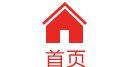
<style>
.page{position:relative;width:129px;height:67px;background:#ffffff}
.page>*{position:absolute;margin:0}
.t1{font:18.9px "MicrosoftYaHei";letter-spacing:0.1em;color:#e82822;scale:1.04 1}
</style>
<div class="page">
<p class="t1" style="left:45px;top:49px;width:41px;height:19px">首页</p>
</div>
